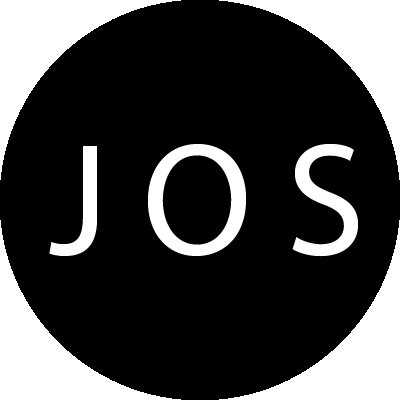
<style>
.page{position:relative;width:400px;height:400px;background:#000000}
.page>*{position:absolute;margin:0}
.t1{font:160px "MyriadPro-Regular";color:#ffffff}
</style>
<div class="page">
<p class="t1" style="left:49px;top:144px;width:309px;height:113px">J O S</p>
</div>
